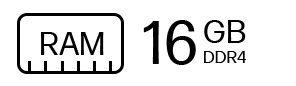
<style>
.page{position:relative;width:296px;height:86px;background:#ffffff}
.page>*{position:absolute;margin:0}
.t1{font:60px "FormaDJRMicro-Regular";color:#000000}
.t2{font:32px "FormaDJRMicro-Regular";color:#000000}
.t3{font:17px "FormaDJRMicro-Regular";color:#000000}
</style>
<div class="page">
<p class="t1" style="left:143px;top:20px;width:53px;height:45px">16</p>
<p class="t2" style="left:204px;top:20px;width:42px;height:23px">GB</p>
<p class="t2" style="left:41px;top:32px;width:63px;height:23px">RAM</p>
<p class="t3" style="left:204px;top:51px;width:42px;height:12px">DDR4</p>
</div>
